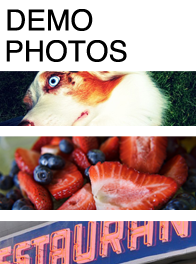
<style>
.page{position:relative;width:196px;height:264px;background:#ffffff}
.page>*{position:absolute;margin:0}
.t1{font:28.9px "Helvetica";color:#000000}
</style>
<div class="page">
<p class="t1" style="left:7px;top:9px;width:86px;height:22px">DEMO</p>
<p class="t1" style="left:6px;top:40px;width:121px;height:22px">PHOTOS</p>
</div>
